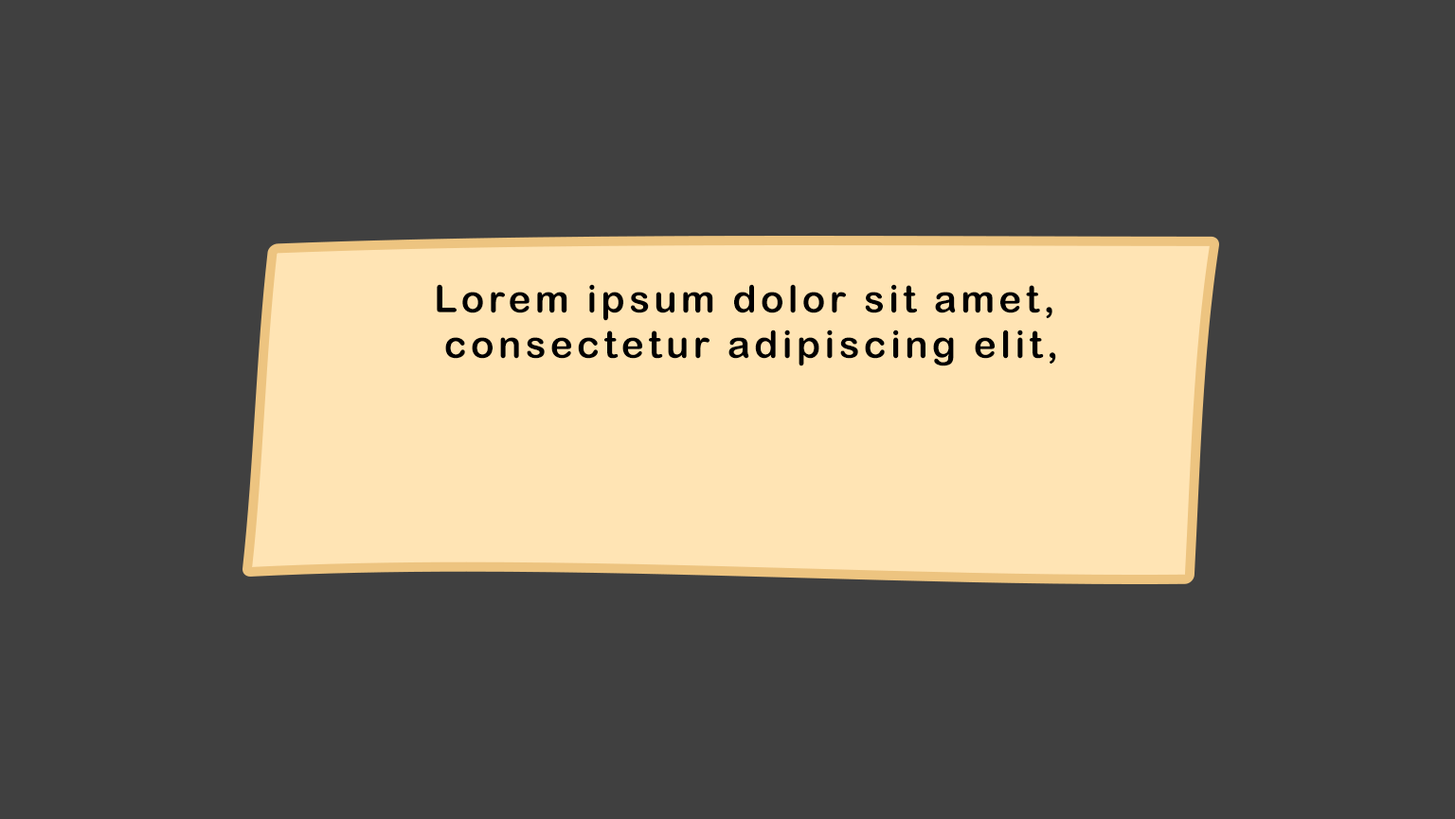
<style>
.page{position:relative;width:1455px;height:819px;background:#404040}
.page>*{position:absolute;margin:0}
.t1{font:37.9px "ArialRoundedMTBold";letter-spacing:0.1em;color:#000000}
</style>
<div class="page">
<p class="t1" style="left:437px;top:284px;width:619px;height:83px;text-align:center">Lorem ipsum dolor sit amet,<br> consectetur adipiscing elit,</p>
</div>
